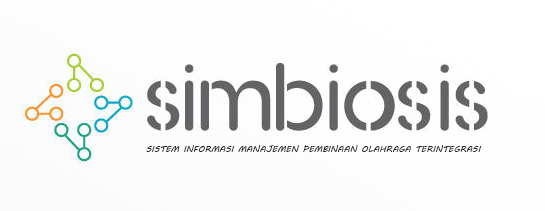
<style>
.page{position:relative;width:545px;height:211px}
.page>*{position:absolute;margin:0}
.t1{font:9px "MVBoli";color:#2c2727}
</style>
<div class="page">
<p class="t1" style="left:146px;top:145px;width:336px;height:7px">SISTEM INFORMASI MANAJEMEN PEMBINAAN OLAHRAGA TERINTEGRASI</p>
</div>
